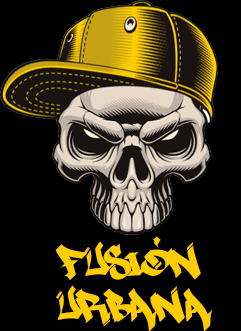
<style>
.page{position:relative;width:241px;height:331px;background:#000000}
.page>*{position:absolute;margin:0}
.t1{font:60px/44px "MARSNEVENEKSK-Clean";letter-spacing:-0.015em;color:#fecc03}
.t2{font:40px "MARSNEVENEKSK-Clean";letter-spacing:-0.015em;color:#fecc03}
</style>
<div class="page">
<p class="t1" style="left:55px;top:241px;width:157px;height:91px">Fusion<br>urbANA</p>
<p class="t2" style="left:153px;top:236px;width:8px;height:11px;rotate:180deg">´</p>
</div>
